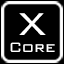
<style>
.page{position:relative;width:64px;height:64px;background:#000000}
.page>*{position:absolute;margin:0}
.t1{font:42px "BankGothicBT-Light";color:#ffffff}
.t2{font:18px "BankGothicBT-Light";color:#ffffff}
</style>
<div class="page">
<p class="t1" style="left:19px;top:13px;width:27px;height:22px">X</p>
<p class="t2" style="left:10px;top:42px;width:45px;height:10px">Core</p>
</div>
